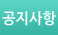
<style>
.page{position:relative;width:58px;height:35px}
.page>*{position:absolute;margin:0}
.t1{font:15px "NanumGothicBold";color:#ffffff;scale:0.95 1}
</style>
<div class="page">
<p class="t1" style="left:2px;top:11px;width:54px;height:15px">공지사항</p>
</div>
